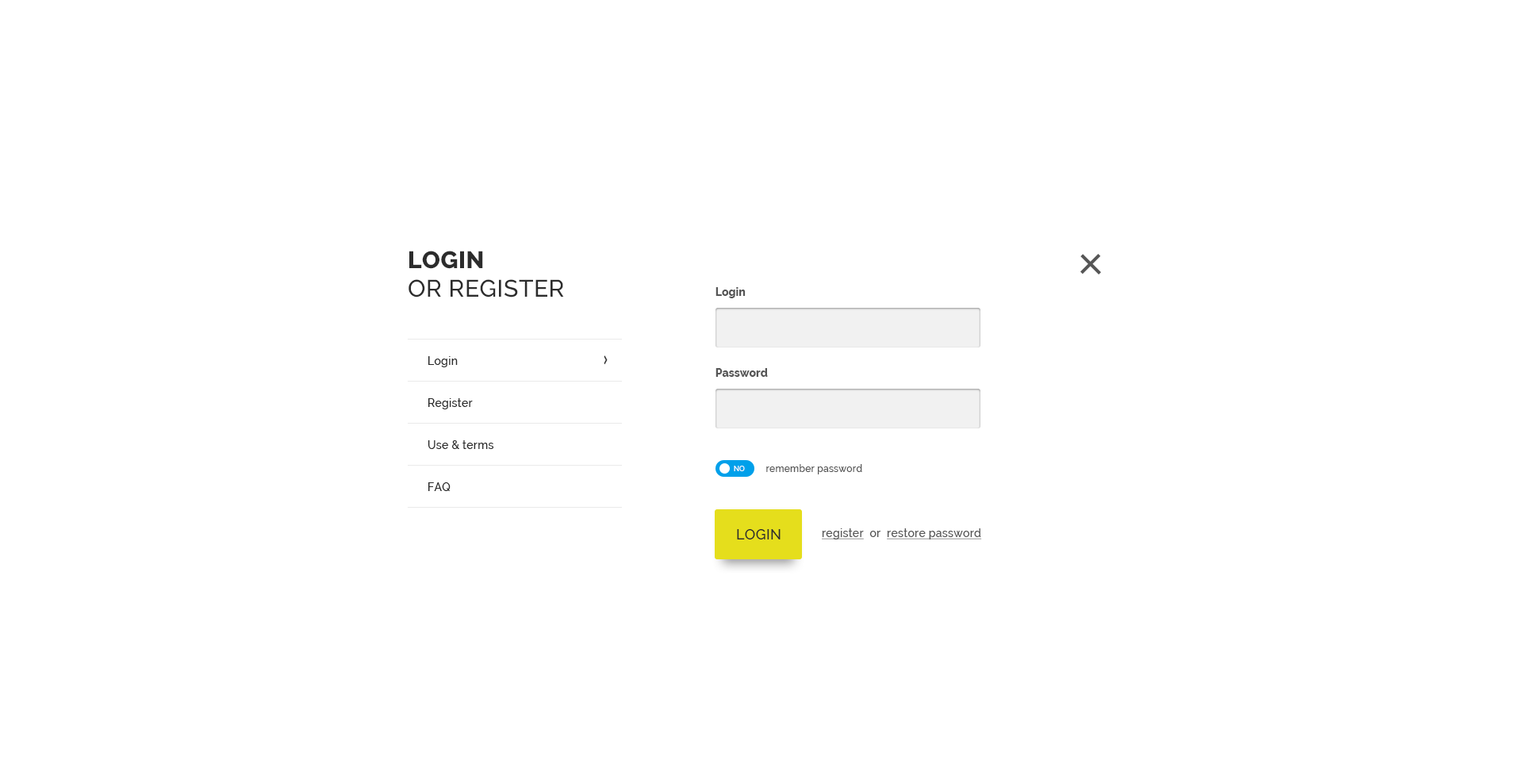
<style>
.page{position:relative;width:1523px;height:783px;background:#ffffff}
.page>*{position:absolute;margin:0}
.t1{font:23.8px/28.6px "Raleway-Medium";letter-spacing:0.02em;color:#2c2c2c;text-transform:uppercase}
.t2{font:23.8px/28.6px "Raleway-ExtraBold";letter-spacing:0.02em;color:#2c2c2c;text-transform:uppercase}
.t3{font:11.1px "Raleway-ExtraBold";color:#565656}
.t4{font:11.1px/42px "Raleway-Medium";letter-spacing:0.02em;color:#2c2c2c}
.t5{font:7.1px "Raleway-Medium";color:#ffffff;text-transform:uppercase}
.t6{font:9.5px "Raleway-Medium";letter-spacing:0.02em;color:#565656}
.t7{font:14.3px "Raleway-Medium";letter-spacing:0.02em;color:#2c2c2c;text-transform:uppercase}
.t8{font:11.1px "Raleway-Medium";letter-spacing:0.02em;color:#565656;text-decoration:underline}
.t9{font:11.1px "Raleway-Medium";letter-spacing:0.02em;color:#565656}
</style>
<div class="page">
<p class="t1" style="left:409px;top:251px;width:155px;height:46px"><span class="t2">Login</span> <br>or register</p>
<p class="t3" style="left:716px;top:287px;width:30px;height:11px">Login</p>
<p class="t4" style="left:428px;top:356px;width:66px;height:135px">Login<br>Register<br>Use &amp; terms<br>FAQ</p>
<p class="t3" style="left:716px;top:368px;width:52px;height:9px">Password</p>
<p class="t5" style="left:734px;top:466px;width:11px;height:5px">no</p>
<p class="t6" style="left:766px;top:464px;width:96px;height:10px">remember password</p>
<p class="t7" style="left:737px;top:529px;width:44px;height:10px">Login</p>
<p class="t8" style="left:822px;top:528px;width:160px;height:11px">register<span class="t9">  or  </span>restore password</p>
</div>
